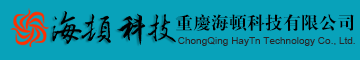
<style>
.page{position:relative;width:360px;height:60px;background:#08a2ba}
.page>*{position:absolute;margin:0}
.t1{font:18px "HYa4gf";color:#000000}
.t2{font:12px "HYb1gj";color:#ff9600}
.t3{font:10px "ArialMT";color:#24292d}
</style>
<div class="page">
<p class="t1" style="left:175px;top:14px;width:179px;height:17px"><span class="t2"> </span>重庆海顿科技有限公司</p>
<p class="t3" style="left:178px;top:37px;width:177px;height:9px">ChongQing HayTn Technology Co., Ltd.</p>
</div>
